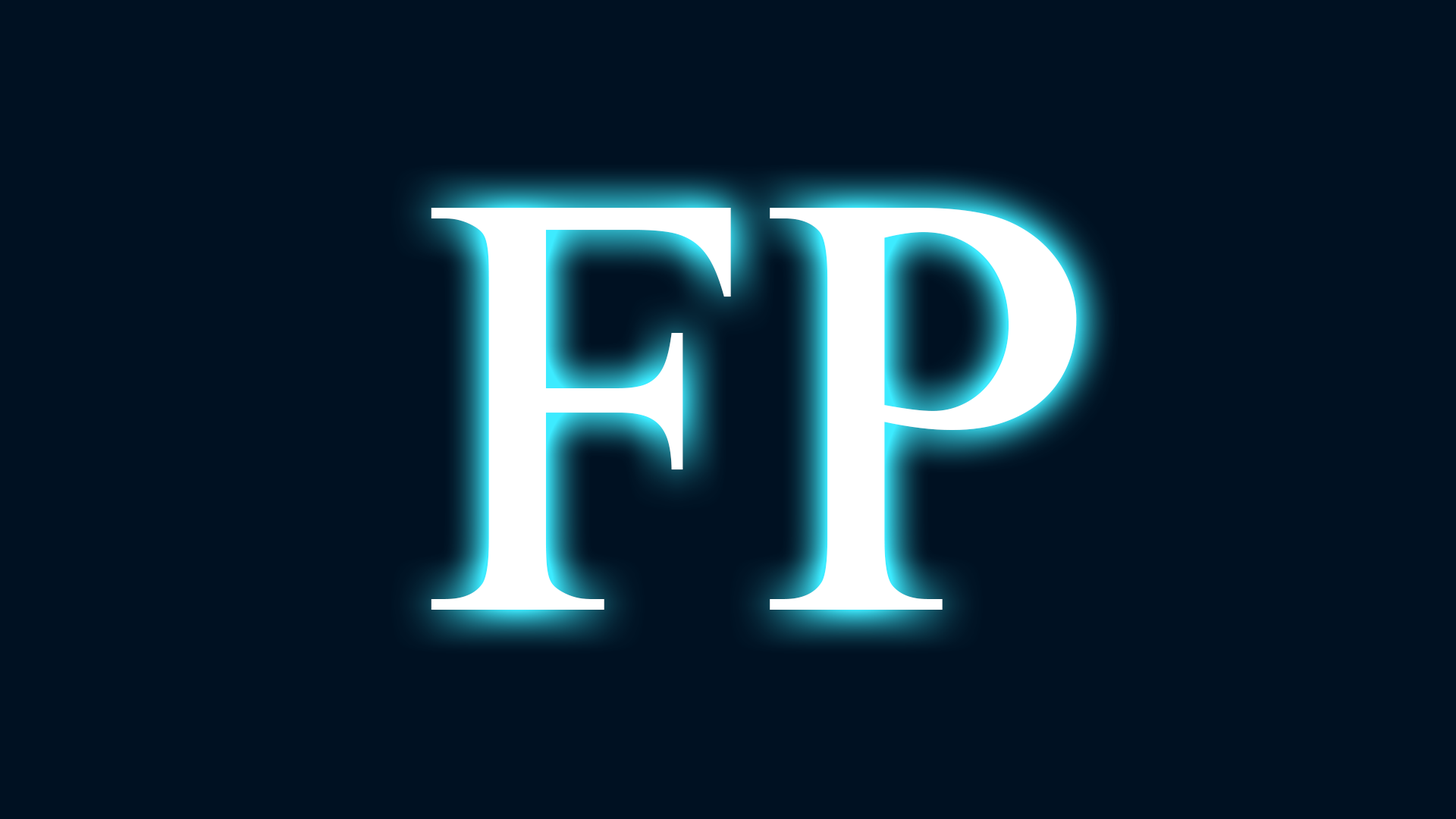
<style>
.page{position:relative;width:1456px;height:819px;background:#001122}
.page>*{position:absolute;margin:0}
.t1{font:607.3px "MongolianBaiti";color:#ffffff}
</style>
<div class="page">
<p class="t1" style="left:431px;top:208px;width:646px;height:402px">FP</p>
</div>
